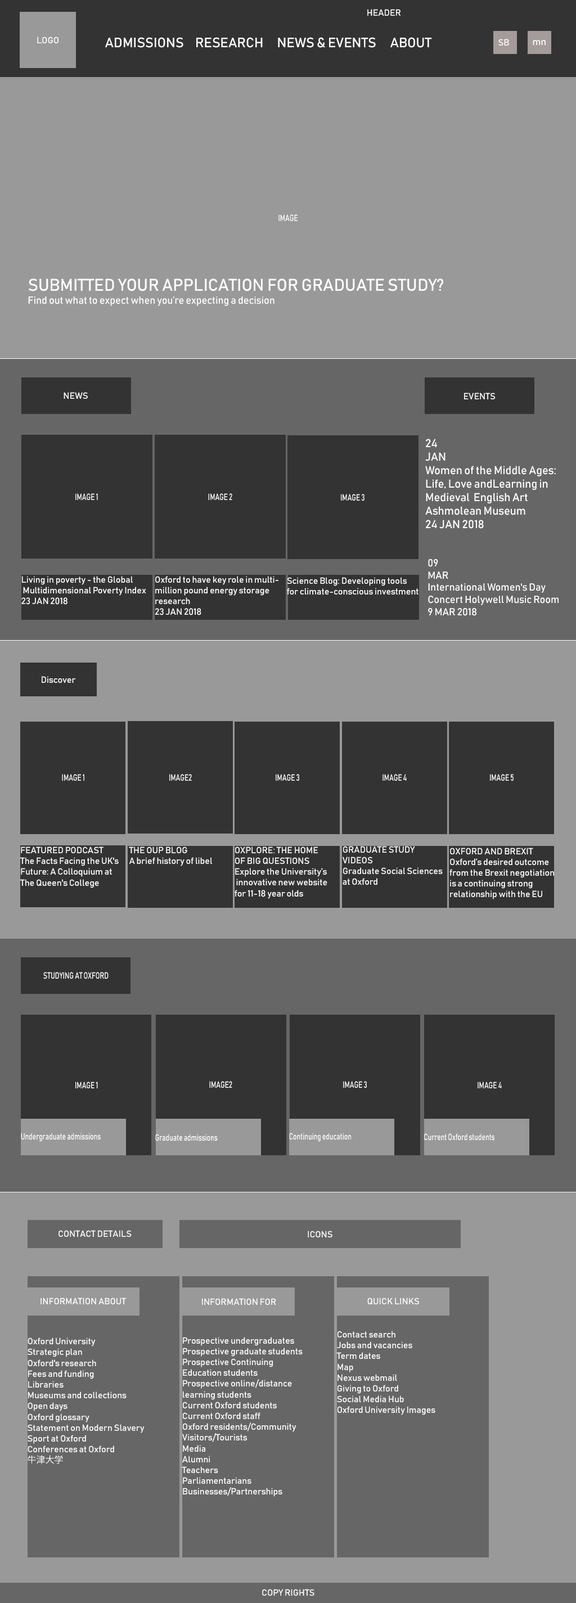
<style>
.page{position:relative;width:576px;height:1603px;background:#999999}
.page>*{position:absolute;margin:0}
.t1{font:9px "Bahnschrift";color:#ffffff}
.t2{font:13.5px "Bahnschrift";color:#ffffff}
.t3{font:9.6px "Bahnschrift";color:#ffffff}
.t4{font:9px "Bahnschrift";color:#ffffff;scale:0.75 1}
.t5{font:16.9px "Bahnschrift";color:#ffffff}
.t6{font:10.1px "Bahnschrift";color:#ffffff}
.t7{font:11.2px "Bahnschrift";color:#ffffff}
.t8{font:9px "KozGoPr6N-Regular";color:#ffffff}
</style>
<div class="page">
<p class="t1" style="left:367px;top:9px;width:33px;height:7px">HEADER</p>
<p class="t1" style="left:37px;top:37px;width:21px;height:6px">LOGO</p>
<p class="t2" style="left:105px;top:37px;width:327px;height:11px">ADMISSIONS     RESEARCH      NEWS &amp; EVENTS      ABOUT</p>
<p class="t1" style="left:498px;top:39px;width:11px;height:7px">SB</p>
<p class="t3" style="left:533px;top:40px;width:13px;height:5px">mn</p>
<p class="t4" style="left:278px;top:214px;width:20px;height:7px">IMAGE</p>
<p class="t5" style="left:28px;top:278px;width:416px;height:13px">SUBMITTED YOUR APPLICATION FOR GRADUATE STUDY?</p>
<p class="t6" style="left:28px;top:296px;width:246px;height:10px">Find out what to expect when you’re expecting a decision</p>
<p class="t1" style="left:64px;top:392px;width:24px;height:7px">NEWS</p>
<p class="t1" style="left:464px;top:393px;width:31px;height:6px">EVENTS</p>
<p class="t7" style="left:425px;top:439px;width:131px;height:90px">24<br>JAN<br>Women of the Middle Ages: <br>Life, Love andLearning in <br>Medieval  English Art <br>Ashmolean Museum<br>24 JAN 2018</p>
<p class="t4" style="left:75px;top:493px;width:23px;height:7px">IMAGE 1</p>
<p class="t4" style="left:208px;top:493px;width:24px;height:7px">IMAGE 2</p>
<p class="t4" style="left:341px;top:494px;width:23px;height:7px">IMAGE 3</p>
<p class="t6" style="left:428px;top:559px;width:131px;height:57px">09<br>MAR<br>International Women's Day <br>Concert Holywell Music Room<br>9 MAR 2018</p>
<p class="t1" style="left:21px;top:576px;width:125px;height:29px">Living in poverty - the Global<br> Multidimensional Poverty Index<br>23 JAN 2018</p>
<p class="t1" style="left:155px;top:576px;width:123px;height:39px">Oxford to have key role in multi-<br>million pound energy storage <br>research<br>23 JAN 2018</p>
<p class="t1" style="left:287px;top:577px;width:131px;height:18px">Science Blog: Developing tools <br>for climate-conscious investment</p>
<p class="t1" style="left:42px;top:676px;width:34px;height:7px">Discover</p>
<p class="t4" style="left:62px;top:774px;width:22px;height:7px">IMAGE 1</p>
<p class="t4" style="left:169px;top:774px;width:23px;height:7px">IMAGE2</p>
<p class="t4" style="left:276px;top:774px;width:23px;height:7px">IMAGE 3</p>
<p class="t4" style="left:382px;top:774px;width:25px;height:7px">IMAGE 4</p>
<p class="t4" style="left:490px;top:774px;width:24px;height:7px">IMAGE 5</p>
<p class="t1" style="left:343px;top:846px;width:100px;height:39px">GRADUATE STUDY <br>VIDEOS<br>Graduate Social Sciences <br>at Oxford</p>
<p class="t1" style="left:20px;top:847px;width:99px;height:41px">FEATURED PODCAST<br>The Facts Facing the UK's <br>Future: A Colloquium at <br>The Queen's College</p>
<p class="t1" style="left:129px;top:847px;width:83px;height:19px">THE OUP BLOG<br>A brief history of libel</p>
<p class="t1" style="left:235px;top:847px;width:92px;height:52px">OXPLORE: THE HOME <br>OF BIG QUESTIONS<br>Explore the University’s<br> innovative new website <br>for 11-18 year olds</p>
<p class="t1" style="left:449px;top:848px;width:105px;height:51px">OXFORD AND BREXIT<br>Oxford’s desired outcome<br>from the Brexit negotiation<br>is a continuing strong <br>relationship with the EU</p>
<p class="t4" style="left:43px;top:972px;width:66px;height:7px">STUDYING AT OXFORD</p>
<p class="t4" style="left:75px;top:1082px;width:23px;height:6px">IMAGE 1</p>
<p class="t4" style="left:209px;top:1081px;width:23px;height:7px">IMAGE2</p>
<p class="t4" style="left:343px;top:1081px;width:24px;height:7px">IMAGE 3</p>
<p class="t4" style="left:478px;top:1082px;width:24px;height:6px">IMAGE 4</p>
<p class="t4" style="left:21px;top:1133px;width:80px;height:9px">Undergraduate admissions</p>
<p class="t4" style="left:155px;top:1134px;width:63px;height:7px">Graduate admissions</p>
<p class="t4" style="left:289px;top:1133px;width:62px;height:9px">Continuing education</p>
<p class="t4" style="left:424px;top:1133px;width:70px;height:8px">Current Oxford students</p>
<p class="t1" style="left:58px;top:1230px;width:74px;height:7px">CONTACT DETAILS</p>
<p class="t1" style="left:308px;top:1231px;width:24px;height:7px">ICONS</p>
<p class="t1" style="left:40px;top:1298px;width:86px;height:6px">INFORMATION ABOUT</p>
<p class="t1" style="left:202px;top:1298px;width:74px;height:7px">INFORMATION FOR</p>
<p class="t1" style="left:367px;top:1298px;width:52px;height:6px">QUICK LINKS</p>
<p class="t1" style="left:28px;top:1338px;width:117px;height:126px">Oxford University<br>Strategic plan<br>Oxford's research<br>Fees and funding<br>Libraries<br>Museums and collections<br>Open days<br>Oxford glossary<br>Statement on Modern Slavery<br>Sport at Oxford<br>Conferences at Oxford<br><span class="t8">牛津大学</span></p>
<p class="t1" style="left:182px;top:1337px;width:121px;height:160px">Prospective undergraduates<br>Prospective graduate students<br>Prospective Continuing <br>Education students<br>Prospective online/distance <br>learning students<br>Current Oxford students<br>Current Oxford staff<br>Oxford residents/Community<br>Visitors/Tourists<br>Media<br>Alumni<br>Teachers<br>Parliamentarians<br>Businesses/Partnerships</p>
<p class="t1" style="left:336px;top:1331px;width:99px;height:84px">Contact search<br>Jobs and vacancies<br>Term dates<br>Map<br>Nexus webmail<br>Giving to Oxford<br>Social Media Hub<br>Oxford University Images</p>
<p class="t1" style="left:262px;top:1589px;width:52px;height:7px">COPY RIGHTS</p>
</div>
